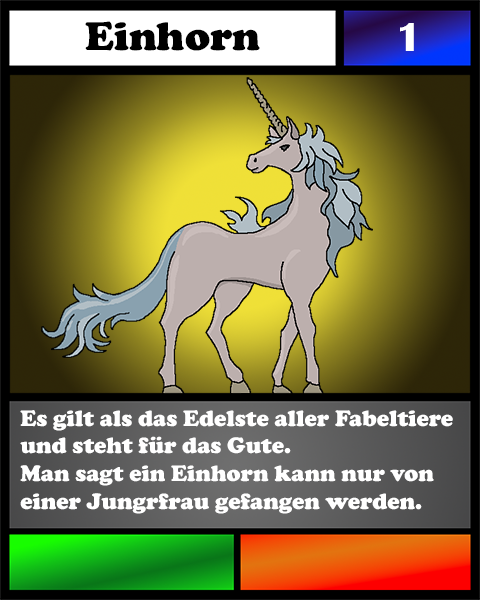
<style>
.page{position:relative;width:480px;height:600px}
.page>*{position:absolute;margin:0}
.t1{font:41.7px "CooperBlack";color:#000000}
.t2{font:41.7px "BritannicBold";color:#ffffff}
.t3{font:23.1px "CooperBlack";color:#ffffff}
</style>
<div class="page">
<p class="t1" style="left:85px;top:21px;width:175px;height:30px">Einhorn</p>
<p class="t2" style="left:400px;top:23px;width:14px;height:28px">1</p>
<p class="t3" style="left:20px;top:410px;width:433px;height:104px">Es gilt als das Edelste aller Fabeltiere <br>und steht für das Gute.<br>Man sagt ein Einhorn kann nur von <br>einer Jungrfrau gefangen werden.</p>
</div>
